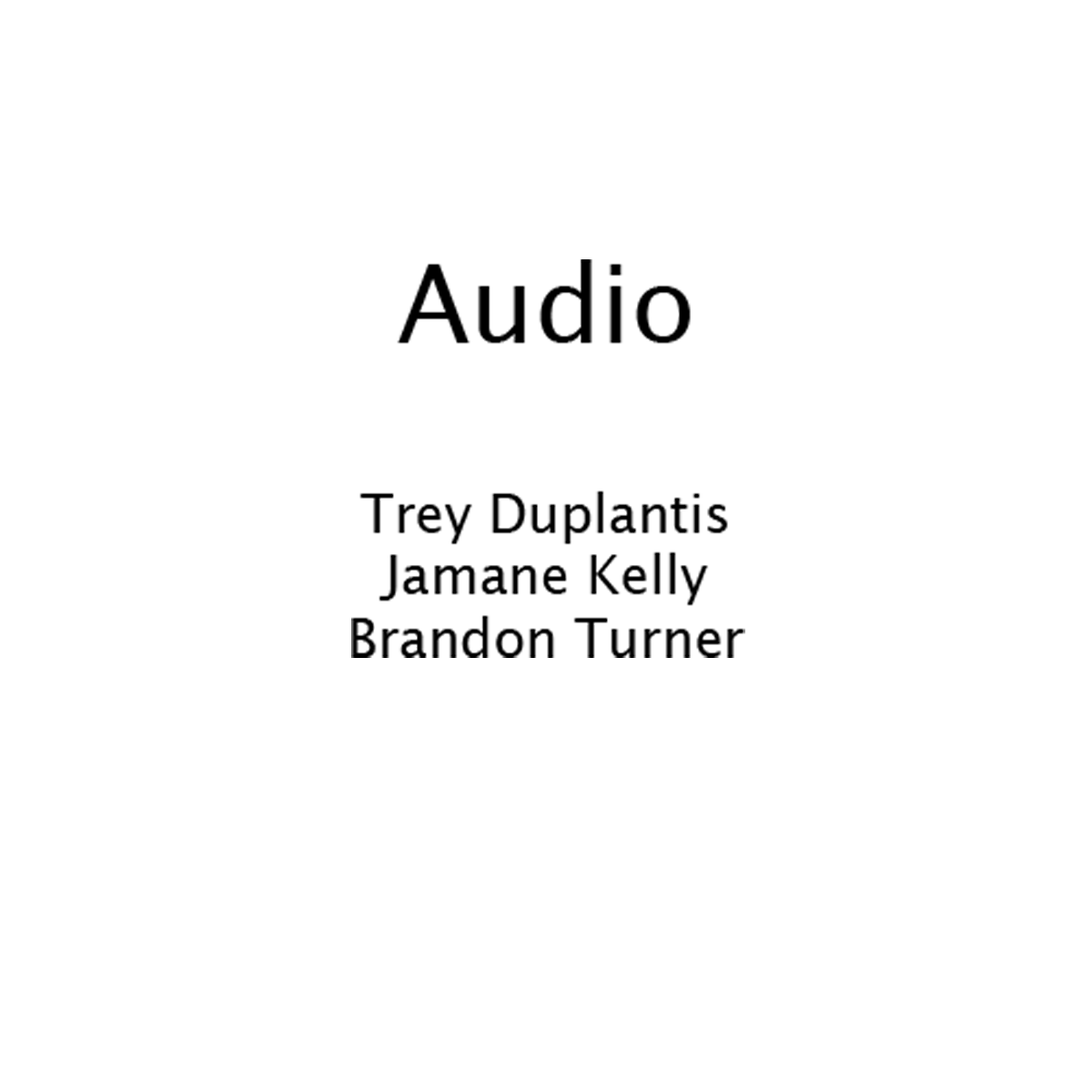
<style>
.page{position:relative;width:1092px;height:1092px;background:#ffffff}
.page>*{position:absolute;margin:0}
.t1{font:52.4px "LucidaGrande";color:#000000}
.t2{font:104.8px "LucidaGrande";color:#9b9b9b}
.t3{font:104.8px "LucidaGrande";color:#000000}
</style>
<div class="page">
<p class="t1" style="left:351px;top:259px;width:394px;height:399px;text-align:center"><span class="t2"><br><br></span><span class="t3">Audio<br><br></span>Trey Duplantis<br>Jamane Kelly<br>Brandon Turner</p>
</div>
